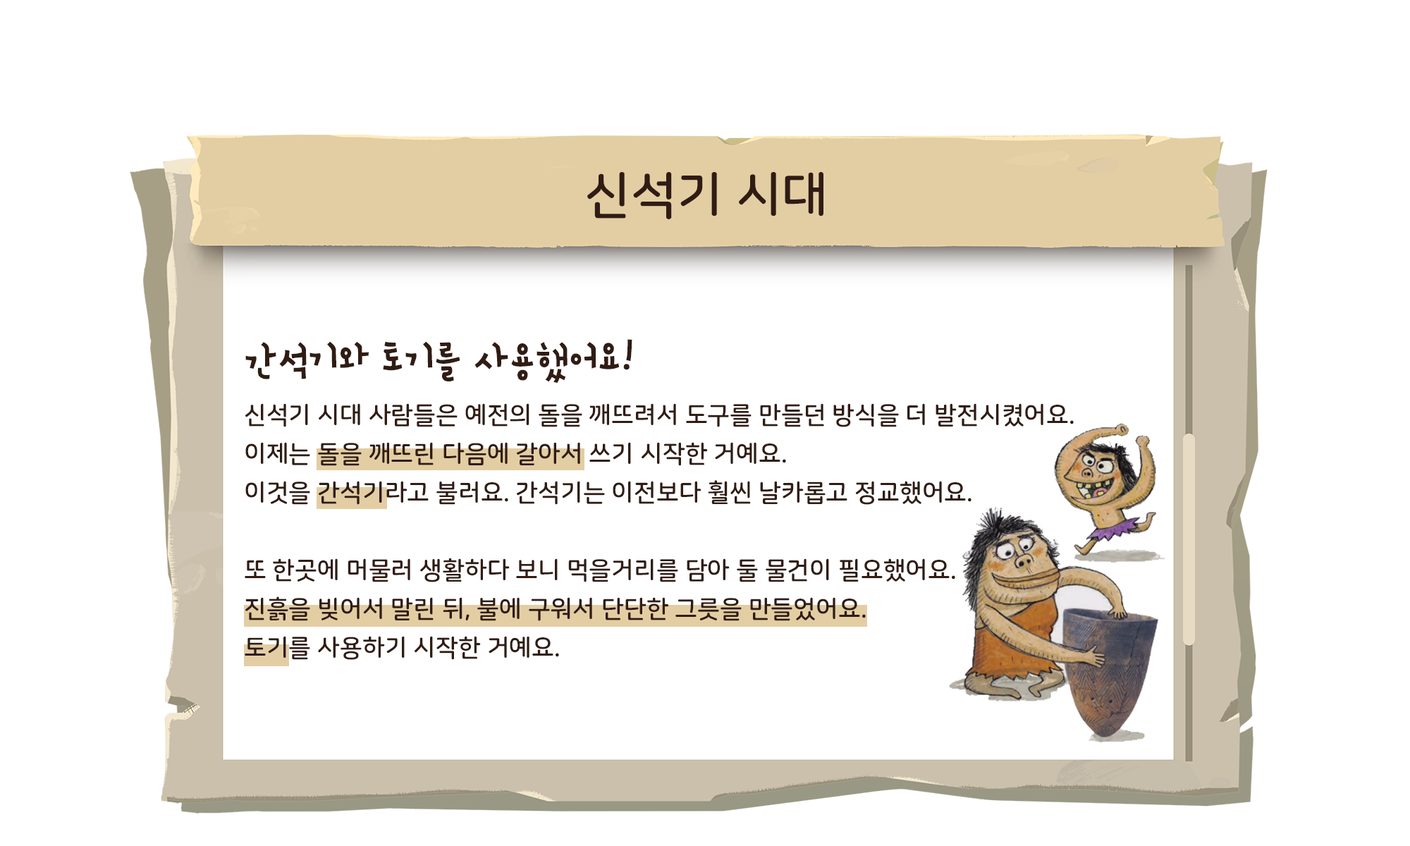
<style>
.page{position:relative;width:1410px;height:846px;background:#ffffff}
.page>*{position:absolute;margin:0}
.t1{font:50.8px "NanumSquareRoundOTFB";color:#301c13}
.t2{font:24.7px/38.8px "NanumSquareRoundOTFB";color:#301c13}
.t3{font:50.8px/64.8px "SDdBYeonpil-cBd";color:#301c13}
</style>
<div class="page">
<p class="t1" style="left:587px;top:172px;width:236px;height:47px">신석기 시대</p>
<p class="t2" style="left:245px;top:339px;width:829px;height:321px"><span class="t3">간석기와 토기를 사용했어요!<br></span>신석기 시대 사람들은 예전의 돌을 깨뜨려서 도구를 만들던 방식을 더 발전시켰어요.<br>이제는 돌을 깨뜨린 다음에 갈아서 쓰기 시작한 거예요. <br>이것을 간석기라고 불러요. 간석기는 이전보다 훨씬 날카롭고 정교했어요. <br><br>또 한곳에 머물러 생활하다 보니 먹을거리를 담아 둘 물건이 필요했어요. <br>진흙을 빚어서 말린 뒤, 불에 구워서 단단한 그릇을 만들었어요.<br>토기를 사용하기 시작한 거예요.</p>
</div>
